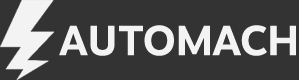
<style>
.page{position:relative;width:299px;height:80px;background:#333333}
.page>*{position:absolute;margin:0}
.t1{font:41.7px "MotivaSans-Bold";color:#f3f3f3}
</style>
<div class="page">
<p class="t1" style="left:59px;top:25px;width:237px;height:31px">AUTOMACH</p>
</div>
